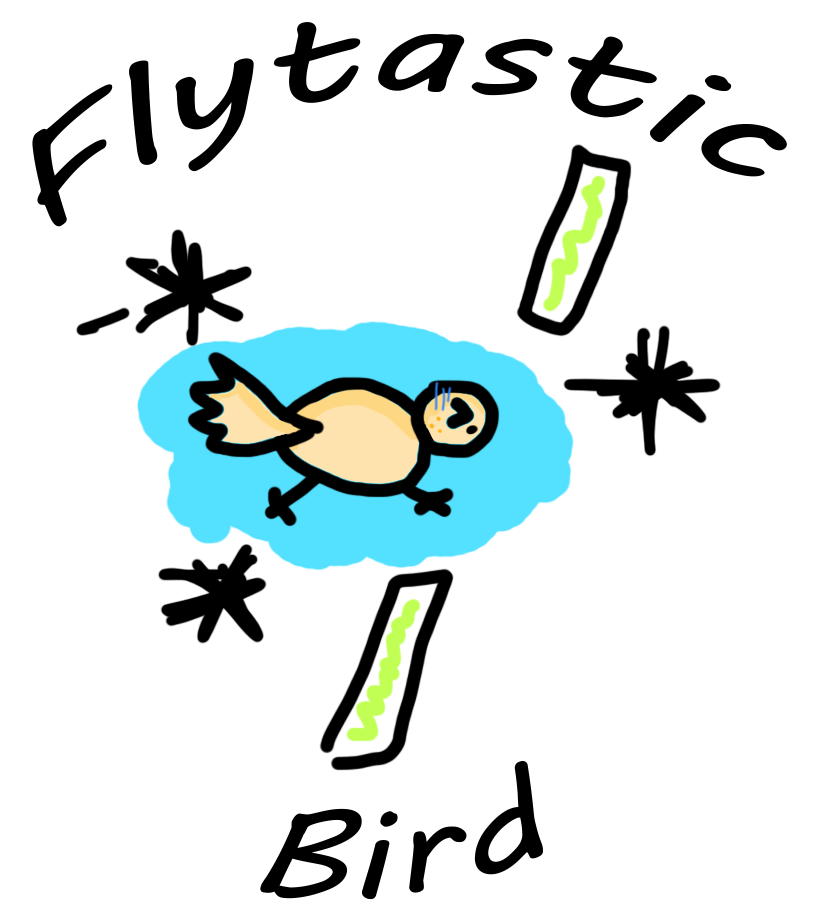
<style>
.page{position:relative;width:830px;height:919px;background:#ffffff}
.page>*{position:absolute;margin:0}
.t1{font:127px "MVBoli";color:#000000}
</style>
<div class="page">
<p class="t1" style="left:32px;top:22px;width:755px;height:205px;rotate:-6deg">Flytastic</p>
<p class="t1" style="left:260px;top:761px;width:283px;height:139px;rotate:-6deg">Bird</p>
</div>
